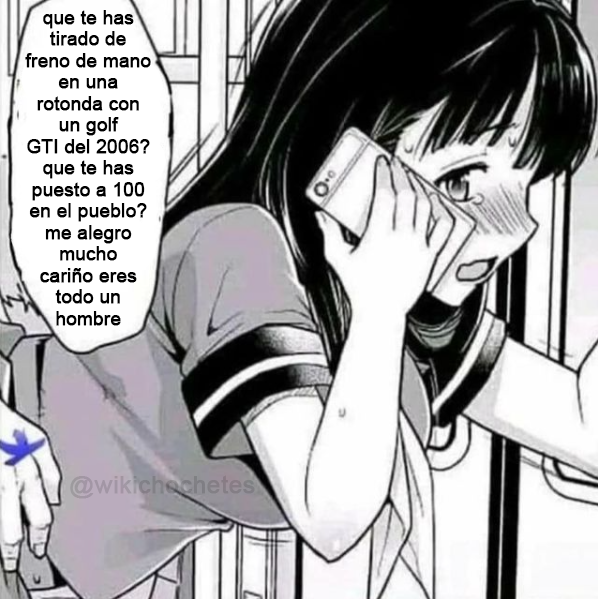
<style>
.page{position:relative;width:598px;height:599px}
.page>*{position:absolute;margin:0}
.t1{font:18.5px "ArialMT";color:#000000;font-weight:bold}
.t2{font:24.5px "ArialMT";font-weight:bold}
</style>
<div class="page">
<p class="t1" style="left:25px;top:10px;width:126px;height:316px;text-align:center">que te has<br>tirado de<br>freno de mano<br>en una<br>rotonda con<br>un golf<br>GTI del 2006?<br>que te has<br>puesto a 100<br>en el pueblo?<br>me alegro<br>mucho<br>cariño eres<br>todo un<br>hombre</p>
<p class="t2" style="left:70px;top:475px;width:185px;height:24px">@wikichochetes</p>
</div>
